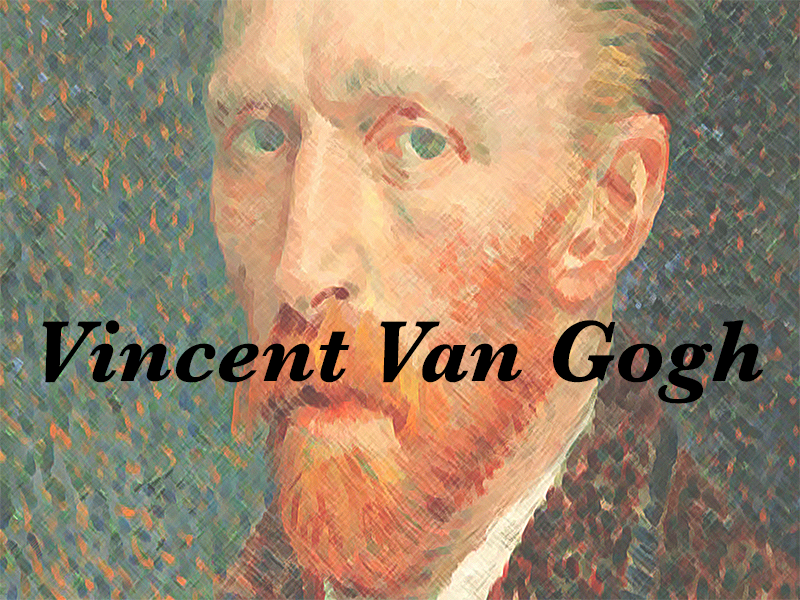
<style>
.page{position:relative;width:800px;height:600px}
.page>*{position:absolute;margin:0}
.t1{font:90px "Baskerville-BoldItalic";color:#000000}
</style>
<div class="page">
<p class="t1" style="left:42px;top:320px;width:722px;height:84px">Vincent Van Gogh</p>
</div>
